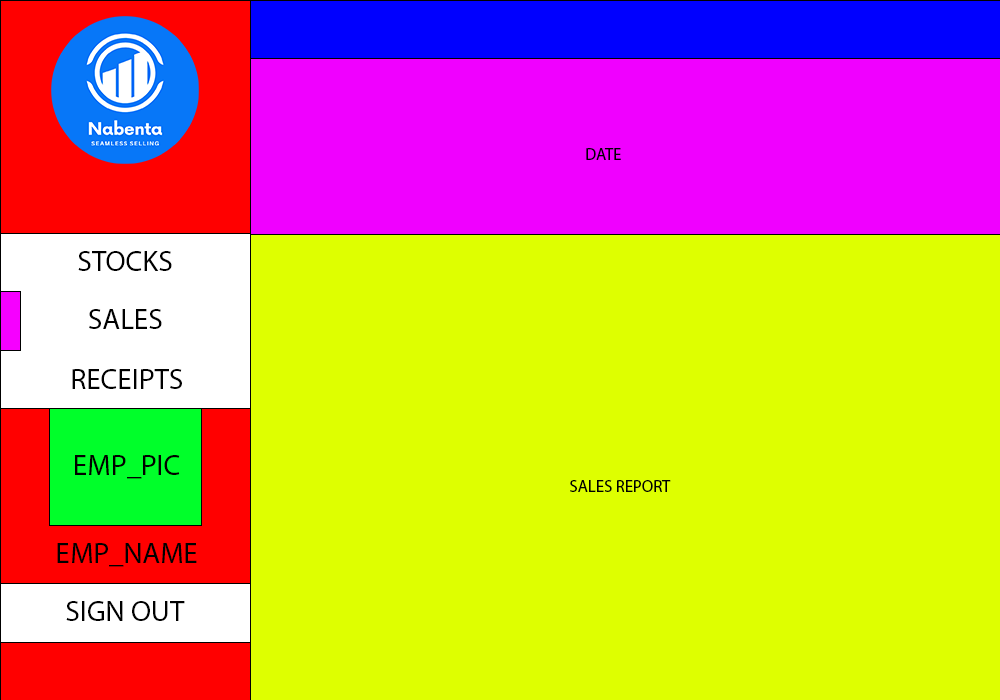
<style>
.page{position:relative;width:1000px;height:700px;background:#deff00}
.page>*{position:absolute;margin:0}
.t1{font:16.7px "MyriadPro-Regular";color:#000000;text-transform:uppercase}
.t2{font:29.2px "MyriadPro-Regular";color:#000000;text-transform:uppercase}
</style>
<div class="page">
<p class="t1" style="left:586px;top:148px;width:35px;height:12px">Date</p>
<p class="t2" style="left:78px;top:251px;width:94px;height:20px">stocks</p>
<p class="t2" style="left:89px;top:309px;width:73px;height:20px">sales</p>
<p class="t2" style="left:72px;top:369px;width:110px;height:20px">receipts</p>
<p class="t2" style="left:75px;top:455px;width:105px;height:24px">emp_pic</p>
<p class="t1" style="left:570px;top:480px;width:101px;height:12px">Sales Report</p>
<p class="t2" style="left:57px;top:543px;width:140px;height:24px">emp_name</p>
<p class="t2" style="left:66px;top:601px;width:119px;height:20px">Sign out</p>
</div>
